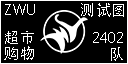
<style>
.page{position:relative;width:128px;height:64px;background:#000000}
.page>*{position:absolute;margin:0}
.t1{font:15.2px "TrebuchetMS";letter-spacing:0.02em;color:#ffffff}
.t2{font:15.2px "AdobeHeitiStd-Regular";letter-spacing:0.02em;color:#ffffff}
.t3{font:15.2px/16.7px "AdobeHeitiStd-Regular";letter-spacing:0.02em;color:#ffffff}
.t4{font:15.2px/16.7px "TrebuchetMS";letter-spacing:0.02em;color:#ffffff}
</style>
<div class="page">
<p class="t1" style="left:5px;top:4px;width:30px;height:11px">ZWU</p>
<p class="t2" style="left:81px;top:3px;width:43px;height:14px">测试图</p>
<p class="t3" style="left:4px;top:31px;width:30px;height:29px">超市<br>购物</p>
<p class="t4" style="left:93px;top:32px;width:30px;height:29px;text-align:right">2402<br><span class="t3">队</span></p>
</div>
